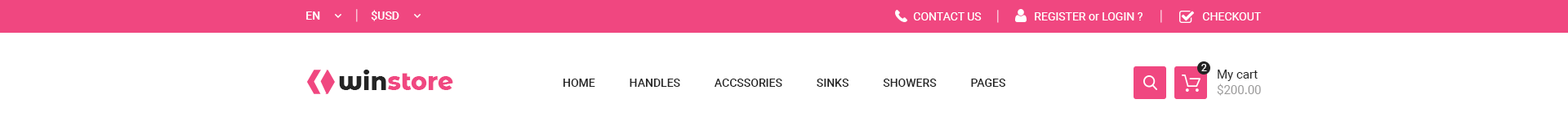
<style>
.page{position:relative;width:1568px;height:131px;background:#ffffff}
.page>*{position:absolute;margin:0}
.t1{font:11.4px "Roboto-Regular";color:#ffffff;text-transform:uppercase}
.t2{font:11.4px "Roboto-Regular";color:#ffffff}
.t3{font:9.8px "Roboto-Regular";color:#ffffff}
.t4{font:24.5px "MontserratAlternates-ExtraBold";color:#f04780}
.t5{font:24.5px "MontserratAlternates-ExtraBold";color:#242424}
.t6{font:12.2px "Roboto-Regular";color:#242424}
.t7{font:11.4px "Roboto-Medium";color:#242424;text-transform:uppercase}
.t8{font:12.2px "Roboto-Regular";color:#9d9c9c}
</style>
<div class="page">
<p class="t1" style="left:913px;top:12px;width:69px;height:8px">contact us</p>
<p class="t1" style="left:1035px;top:12px;width:108px;height:8px">register <span class="t2">or </span>login ?</p>
<p class="t1" style="left:1202px;top:12px;width:59px;height:8px">checkout</p>
<p class="t3" style="left:1201px;top:64px;width:6px;height:7px">2</p>
<p class="t4" style="left:339px;top:69px;width:114px;height:21px"><span class="t5">win</span>store</p>
<p class="t6" style="left:1218px;top:69px;width:40px;height:12px">My cart</p>
<p class="t7" style="left:563px;top:78px;width:442px;height:9px">home            handles            accssories            sinks            showers            pages</p>
<p class="t8" style="left:1217px;top:83px;width:44px;height:13px">$200.00</p>
</div>
